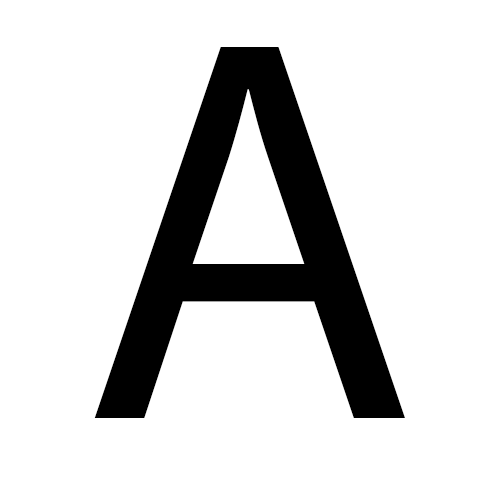
<style>
.page{position:relative;width:500px;height:500px;background:#ffffff}
.page>*{position:absolute;margin:0}
.t1{font:550px "MyriadPro-Regular";color:#000000}
</style>
<div class="page">
<p class="t1" style="left:94px;top:47px;width:311px;height:371px">A</p>
</div>
